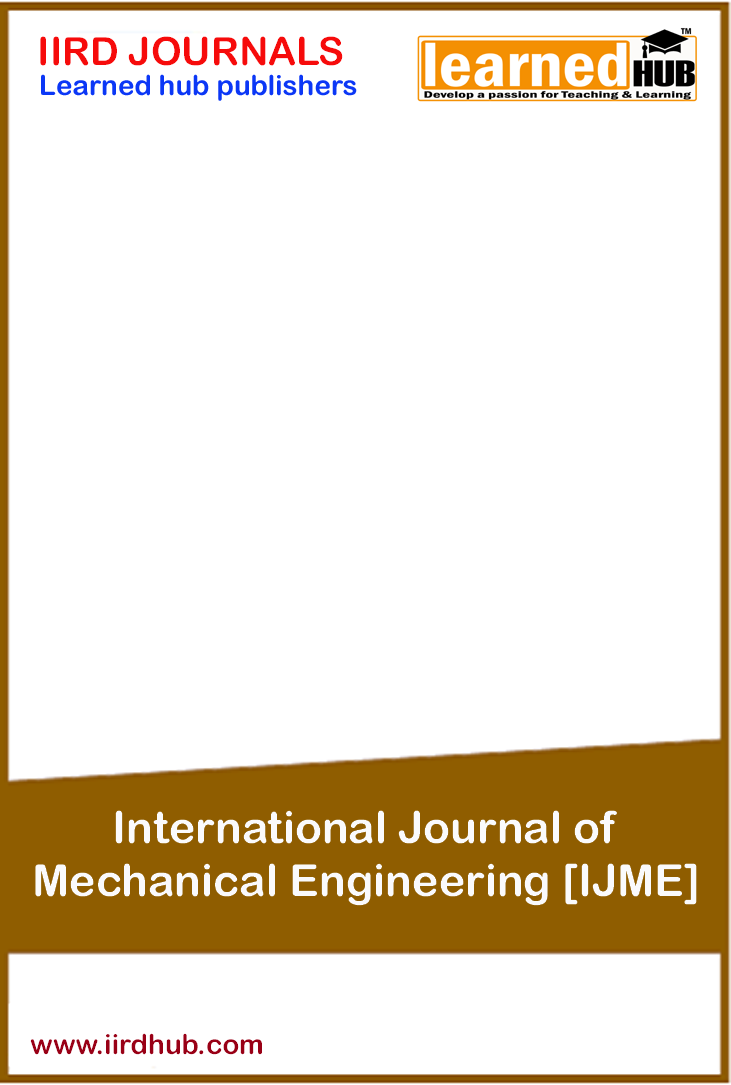
<style>
.page{position:relative;width:731px;height:1085px;background:#ffffff}
.page>*{position:absolute;margin:0}
.t1{font:38.9px "ArialRoundedMTBold";color:#f60b0b}
.t2{font:27.8px "ArialRoundedMTBold";color:#0b37f6}
.t3{font:44.4px "ArialRoundedMTBold";color:#fafafc}
.t4{font:27.8px "ArialRoundedMTBold";color:#990016}
</style>
<div class="page">
<p class="t1" style="left:40px;top:36px;width:303px;height:30px">IIRD JOURNALS</p>
<p class="t2" style="left:41px;top:74px;width:316px;height:27px">Learned hub publishers</p>
<p class="t3" style="left:35px;top:810px;width:662px;height:96px;text-align:center">International Journal of <br>Mechanical Engineering [IJME]</p>
<p class="t4" style="left:30px;top:1033px;width:232px;height:22px">www.iirdhub.com</p>
</div>
